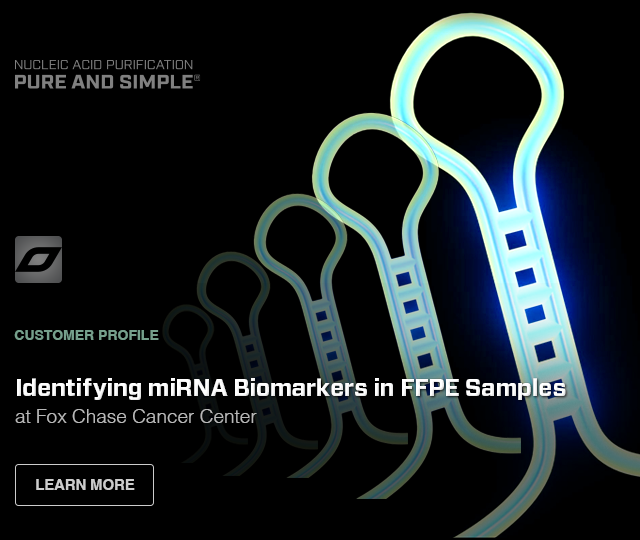
<style>
.page{position:relative;width:640px;height:540px;background:#000000}
.page>*{position:absolute;margin:0}
.t1{font:14px "Helvetica-Bold";color:#76a08c;text-transform:uppercase}
.t2{font:24px "Forza-Bold";letter-spacing:-0.01em;color:#fefefe}
.t3{font:19px "Helvetica-Light";color:#b8b8b8}
.t4{font:15px "Helvetica-Bold";letter-spacing:-0.01em;color:#cccccc;text-transform:uppercase}
</style>
<div class="page">
<p class="t1" style="left:14px;top:330px;width:145px;height:10px">Customer Profile</p>
<p class="t2" style="left:17px;top:378px;width:549px;height:22px">Identifying miRNA Biomarkers in FFPE Samples</p>
<p class="t3" style="left:15px;top:409px;width:242px;height:14px">at Fox Chase Cancer Center</p>
<p class="t4" style="left:36px;top:479px;width:99px;height:11px">Learn More</p>
</div>
